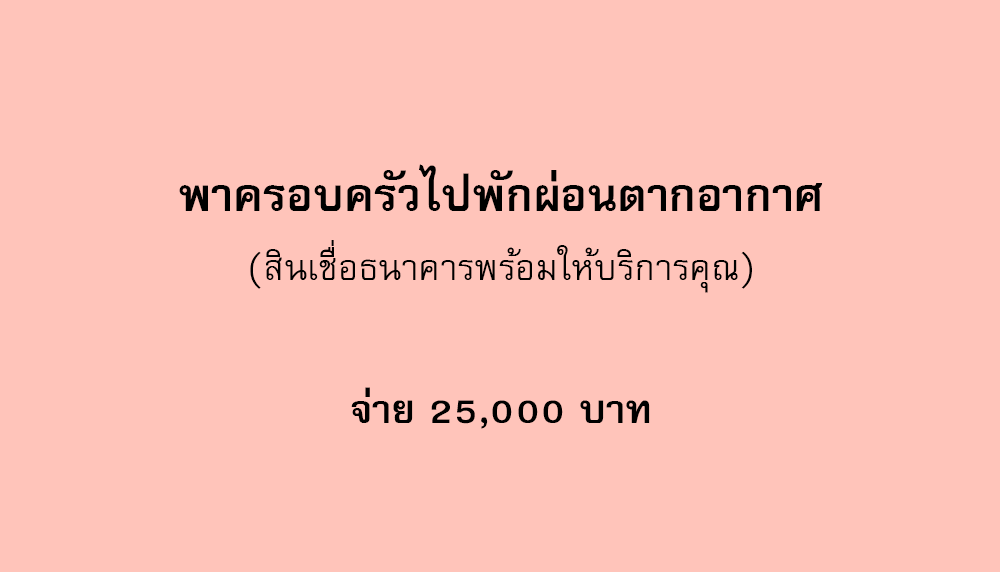
<style>
.page{position:relative;width:1000px;height:572px;background:#ffc4ba}
.page>*{position:absolute;margin:0}
.t1{font:64px "FreesiaUPCBold";color:#000000}
.t2{font:50px "FreesiaUPC";color:#000000}
.t3{font:56px "FreesiaUPCBold";color:#000000}
</style>
<div class="page">
<p class="t1" style="left:179px;top:164px;width:644px;height:47px">พาครอบครัวไปพักผ่อนตากอากาศ</p>
<p class="t2" style="left:250px;top:240px;width:502px;height:53px">(สินเชื่อธนาคารพร้อมให้บริการคุณ)</p>
<p class="t3" style="left:351px;top:387px;width:299px;height:42px">จ่าย 25,000 บาท</p>
</div>
